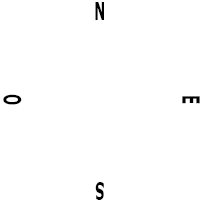
<style>
.page{position:relative;width:200px;height:200px;background:#ffffff}
.page>*{position:absolute;margin:0}
.t1{font:24px "Verdana-Bold";color:#000000;scale:0.55 1}
</style>
<div class="page">
<p class="t1" style="left:95px;top:2px;width:9px;height:18px">N</p>
<p class="t1" style="left:3px;top:94px;width:19px;height:11px;rotate:90deg">O</p>
<p class="t1" style="left:182px;top:96px;width:18px;height:8px;rotate:90deg">E</p>
<p class="t1" style="left:95px;top:182px;width:9px;height:18px;rotate:180deg">S</p>
</div>
